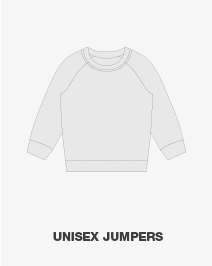
<style>
.page{position:relative;width:212px;height:266px;background:#f6f6f6}
.page>*{position:absolute;margin:0}
.t1{font:12px "HelveticaNeueLTStd-Hv";color:#3d3d3d}
</style>
<div class="page">
<p class="t1" style="left:53px;top:232px;width:110px;height:9px">UNISEX JUMPERS</p>
</div>
